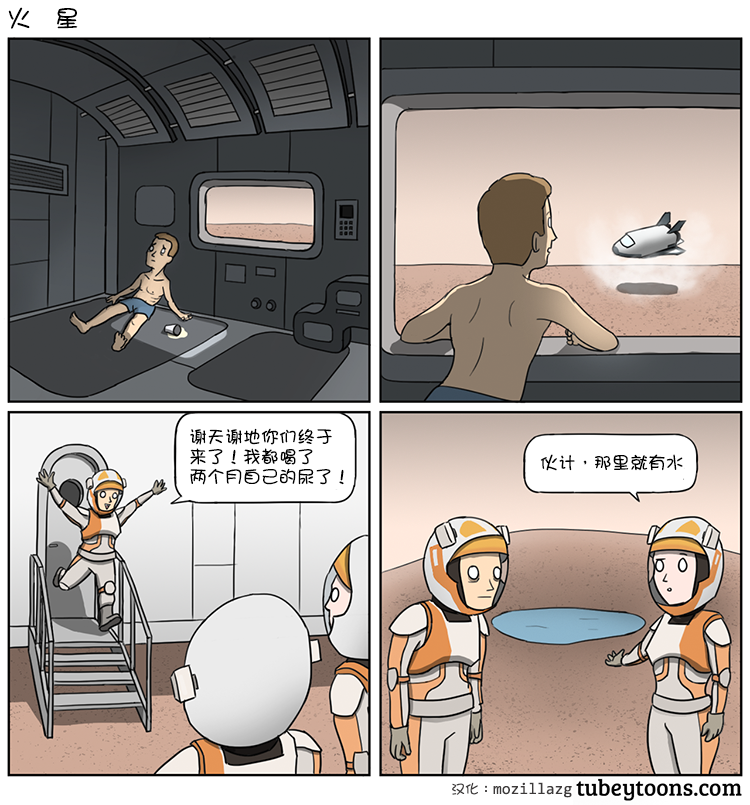
<style>
.page{position:relative;width:750px;height:805px}
.page>*{position:absolute;margin:0}
.t1{font:24px "DFGirl";letter-spacing:1.02em;color:#000000}
.t2{font:18px/20px "DFGirl";color:#000000}
.t3{font:18px "DFGirl";color:#000000}
</style>
<div class="page">
<p class="t1" style="left:8px;top:7px;width:70px;height:22px">火星</p>
<p class="t2" style="left:190px;top:428px;width:154px;height:57px">谢天谢地你们终于<br>来了！我都喝了<br>两个月自己的尿了！</p>
<p class="t3" style="left:540px;top:454px;width:143px;height:17px">伙计，那里就有水</p>
</div>
